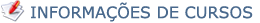
<style>
.page{position:relative;width:260px;height:23px;background:#ffffff}
.page>*{position:absolute;margin:0}
.t1{font:16px "Verdana";color:#49698d}
</style>
<div class="page">
<p class="t1" style="left:31px;top:2px;width:222px;height:20px">INFORMAÇÕES DE CURSOS</p>
</div>
